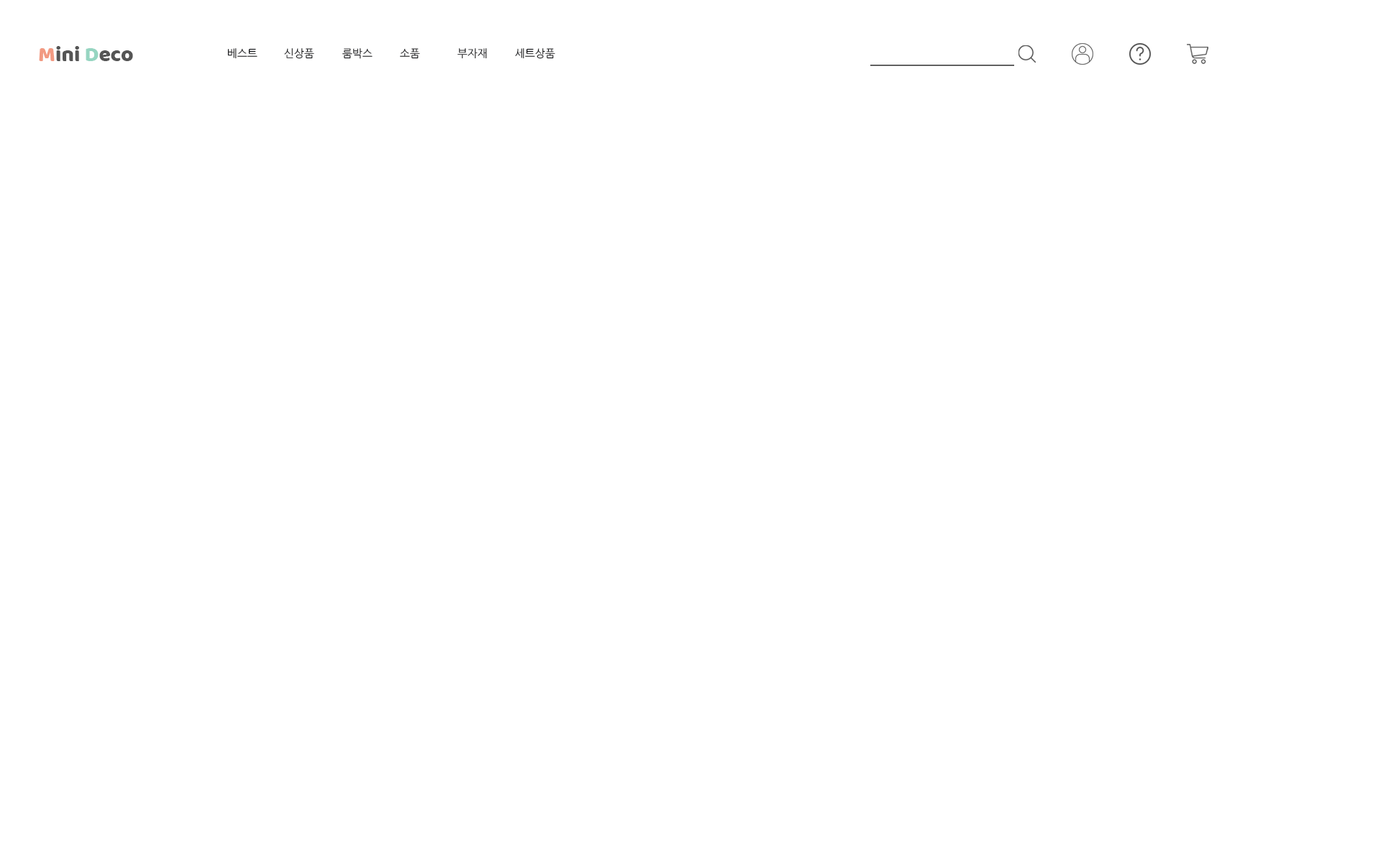
<style>
.page{position:relative;width:1381px;height:863px;background:#ffffff}
.page>*{position:absolute;margin:0}
.t1{font:21.6px "Baloo-Regular";color:#555555}
.t2{font:21.6px "Baloo-Regular";color:#f29a82}
.t3{font:21.6px "Baloo-Regular";color:#96d5c1}
.t4{font:10.8px "NanumGothic";color:#121316}
</style>
<div class="page">
<p class="t1" style="left:39px;top:46px;width:94px;height:15px"><span class="t2">M</span>ini <span class="t3">D</span>eco</p>
<p class="t4" style="left:227px;top:48px;width:31px;height:11px">베스트</p>
<p class="t4" style="left:284px;top:48px;width:30px;height:11px">신상품</p>
<p class="t4" style="left:342px;top:48px;width:31px;height:11px">룸박스</p>
<p class="t4" style="left:400px;top:48px;width:20px;height:11px">소품</p>
<p class="t4" style="left:458px;top:48px;width:29px;height:11px">부자재</p>
<p class="t4" style="left:515px;top:48px;width:40px;height:11px">세트상품</p>
</div>
